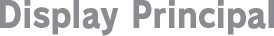
<style>
.page{position:relative;width:274px;height:36px;background:#ffffff}
.page>*{position:absolute;margin:0}
.t1{font:36px "RodinPro-EB";letter-spacing:0.001em;color:#8b8c92;scale:0.87 1}
</style>
<div class="page">
<p class="t1" style="left:0px;top:0px;width:274px;height:36px">Display Principal</p>
</div>
